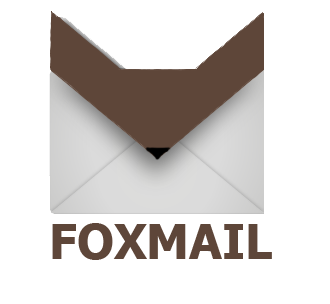
<style>
.page{position:relative;width:330px;height:304px;background:#ffffff}
.page>*{position:absolute;margin:0}
.t1{font:48px "Tahoma-Bold";color:#5e4639}
</style>
<div class="page">
<p class="t1" style="left:52px;top:223px;width:220px;height:37px">FOXMAIL</p>
</div>
